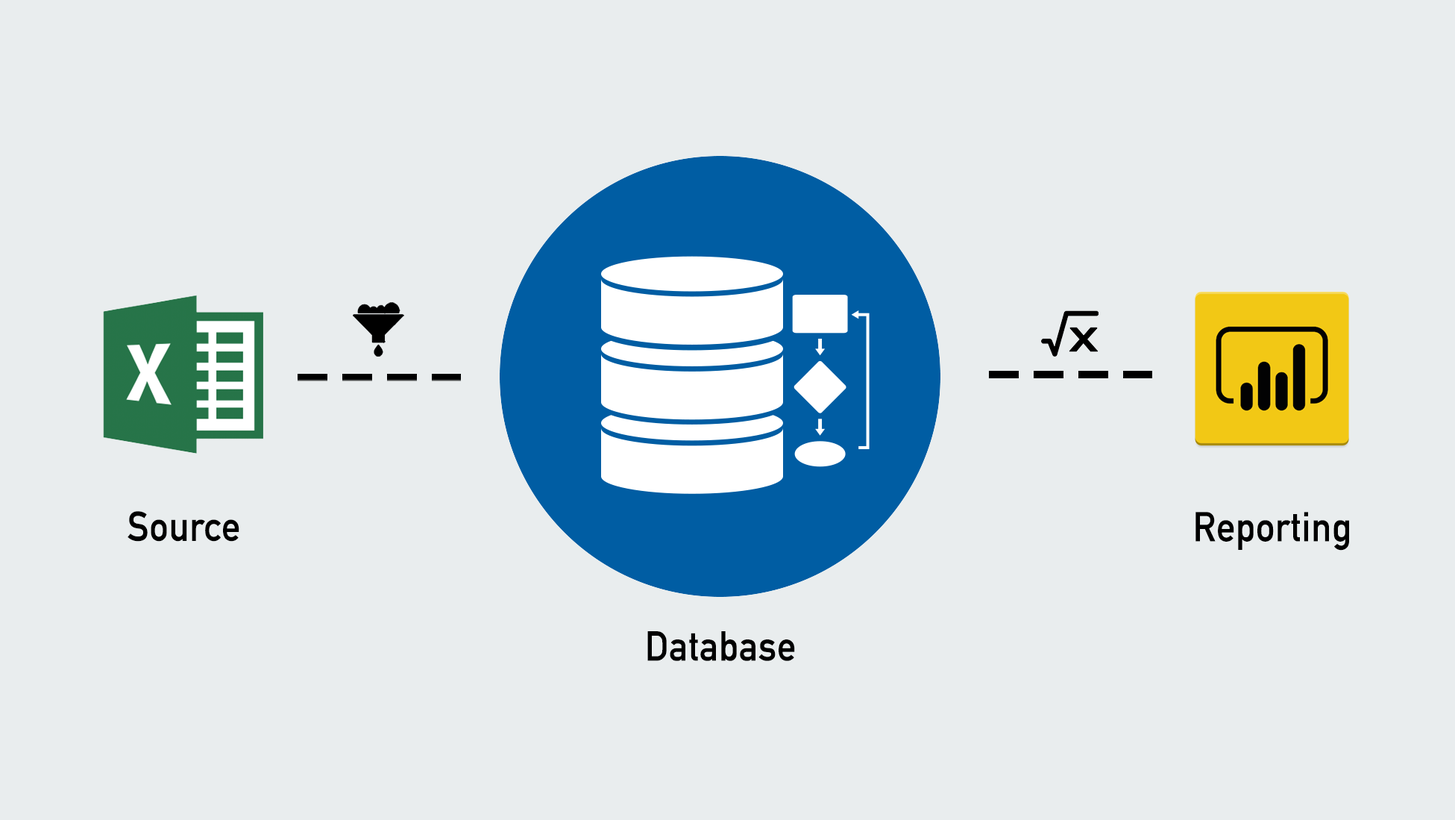
<style>
.page{position:relative;width:1455px;height:820px;background:#e9edee}
.page>*{position:absolute;margin:0}
.t1{font:41px "DINAlternate-Bold";letter-spacing:0.02em;color:#000000;scale:0.91 1}
</style>
<div class="page">
<p class="t1" style="left:128px;top:511px;width:111px;height:30px">Source</p>
<p class="t1" style="left:1195px;top:512px;width:154px;height:38px">Reporting</p>
<p class="t1" style="left:647px;top:631px;width:148px;height:30px">Database</p>
</div>
